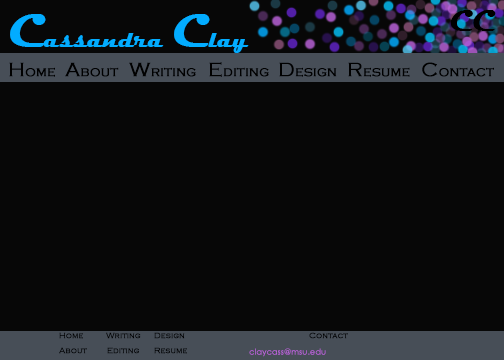
<style>
.page{position:relative;width:504px;height:360px;background:#070707}
.page>*{position:absolute;margin:0}
.t1{font:24px "Magneto-Bold";color:#02acff}
.t2{font:48px "Magneto-Bold";color:#02acff}
.t3{font:30px "Magneto-Bold";color:#000000}
.t4{font:14px "CopperplateGothic-Light";color:#000000;font-weight:bold}
.t5{font:20px "CopperplateGothic-Light";color:#000000;font-weight:bold}
.t6{font:8px "CopperplateGothic-Light";color:#000000;font-weight:bold}
.t7{font:8px "CenturyGothic";color:#ba62d9;font-weight:bold}
</style>
<div class="page">
<p class="t1" style="left:10px;top:14px;width:239px;height:39px"><span class="t2">C</span>assandra <span class="t2">C</span>lay</p>
<p class="t3" style="left:450px;top:10px;width:46px;height:21px">CC</p>
<p class="t4" style="left:9px;top:62px;width:46px;height:15px"><span class="t5">H</span>ome</p>
<p class="t4" style="left:65px;top:62px;width:54px;height:15px"><span class="t5">A</span>bout</p>
<p class="t4" style="left:129px;top:62px;width:67px;height:15px"><span class="t5">W</span>riting</p>
<p class="t4" style="left:209px;top:62px;width:60px;height:15px"><span class="t5">E</span>diting</p>
<p class="t4" style="left:279px;top:62px;width:58px;height:15px"><span class="t5">D</span>esign</p>
<p class="t4" style="left:348px;top:62px;width:62px;height:15px"><span class="t5">R</span>esume</p>
<p class="t4" style="left:422px;top:62px;width:72px;height:15px"><span class="t5">C</span>ontact</p>
<p class="t6" style="left:59px;top:332px;width:24px;height:7px">Home</p>
<p class="t6" style="left:106px;top:332px;width:35px;height:7px">Writing</p>
<p class="t6" style="left:154px;top:332px;width:31px;height:7px">Design</p>
<p class="t6" style="left:309px;top:332px;width:39px;height:7px">Contact</p>
<p class="t6" style="left:59px;top:347px;width:28px;height:7px">About</p>
<p class="t6" style="left:107px;top:347px;width:32px;height:7px">Editing</p>
<p class="t6" style="left:154px;top:347px;width:33px;height:7px">Resume</p>
<p class="t7" style="left:249px;top:348px;width:77px;height:9px">claycass@msu.edu</p>
</div>
